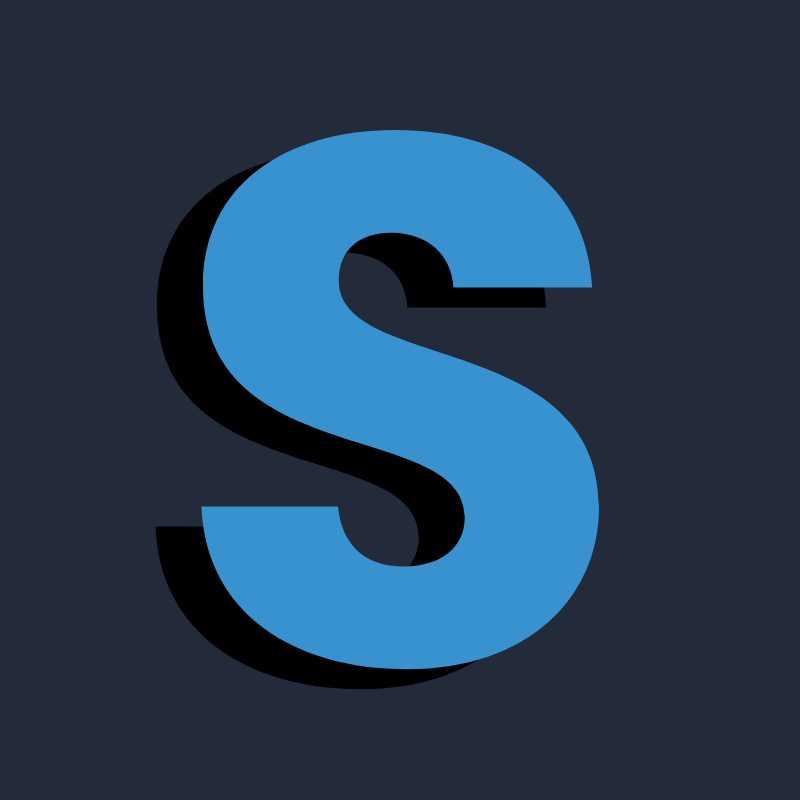
<style>
.page{position:relative;width:800px;height:800px;background:#232b3a}
.page>*{position:absolute;margin:0}
.t1{font:750px "Poppins-Bold";color:#3992d0}
</style>
<div class="page">
<p class="t1" style="left:201px;top:130px;width:398px;height:540px">S</p>
</div>
